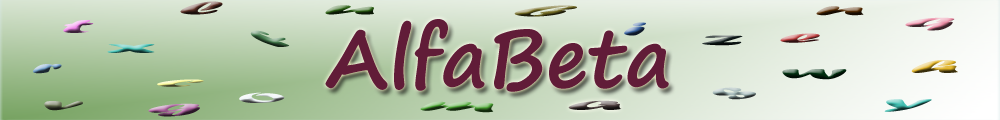
<style>
.page{position:relative;width:1000px;height:120px}
.page>*{position:absolute;margin:0}
.t1{font:19.2px "ForteMT";scale:5.21 1}
.t2{font:52.1px "ForteMT";scale:1.68 1}
.t3{font:57.9px "ForteMT";scale:1.45 1}
.t4{font:80px "SegoePrint-Bold";color:#611c38}
.t5{font:52.3px "ForteMT";scale:1.67 1}
.t6{font:63.5px "ForteMT";scale:1.25 1}
.t7{font:55.9px "ForteMT";scale:1.52 1}
</style>
<div class="page">
<p class="t1" style="left:180px;top:1px;width:43px;height:14px">l</p>
<p class="t1" style="left:325px;top:5px;width:49px;height:10px">u</p>
<p class="t2" style="left:514px;top:5px;width:63px;height:12px;rotate:6deg">b</p>
<p class="t1" style="left:816px;top:6px;width:48px;height:10px">n</p>
<p class="t1" style="left:905px;top:17px;width:50px;height:14px">q</p>
<p class="t1" style="left:63px;top:19px;width:31px;height:14px">t</p>
<p class="t3" style="left:250px;top:30px;width:40px;height:17px;rotate:-7deg">f</p>
<p class="t4" style="left:325px;top:19px;width:344px;height:73px">AlfaBeta</p>
<p class="t1" style="left:624px;top:22px;width:22px;height:14px">i</p>
<p class="t1" style="left:702px;top:35px;width:41px;height:11px">z</p>
<p class="t1" style="left:780px;top:33px;width:40px;height:10px">e</p>
<p class="t1" style="left:107px;top:44px;width:48px;height:9px">x</p>
<p class="t1" style="left:33px;top:64px;width:29px;height:10px">r</p>
<p class="t1" style="left:911px;top:60px;width:47px;height:13px">h</p>
<p class="t1" style="left:782px;top:69px;width:65px;height:11px">w</p>
<p class="t5" style="left:157px;top:79px;width:47px;height:8px;rotate:6deg">c</p>
<p class="t6" style="left:712px;top:87px;width:44px;height:13px;rotate:-9deg">s</p>
<p class="t1" style="left:44px;top:101px;width:39px;height:10px">v</p>
<p class="t7" style="left:239px;top:92px;width:46px;height:11px;rotate:-7deg">o</p>
<p class="t1" style="left:420px;top:101px;width:74px;height:12px">m</p>
<p class="t1" style="left:568px;top:100px;width:54px;height:10px">a</p>
<p class="t1" style="left:884px;top:99px;width:48px;height:13px">y</p>
<p class="t1" style="left:148px;top:103px;width:52px;height:14px">g</p>
</div>
